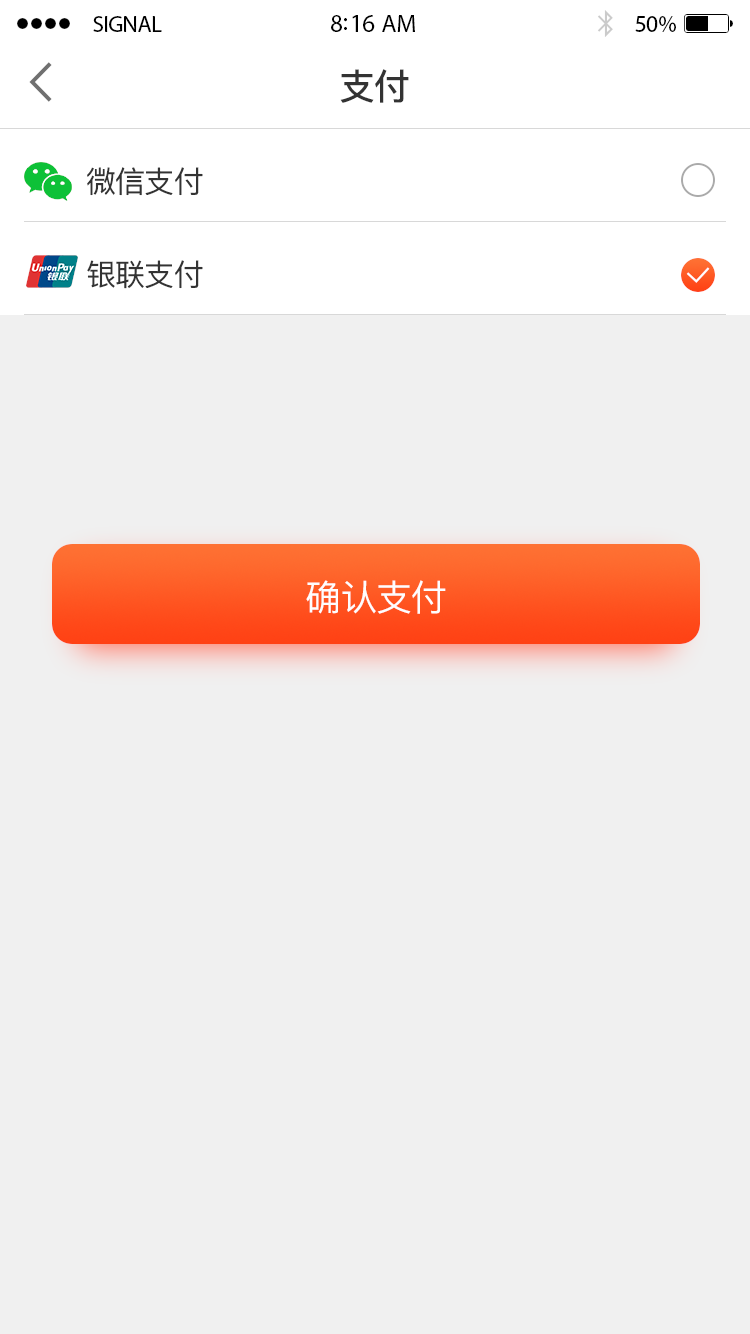
<style>
.page{position:relative;width:750px;height:1334px;background:#f0f0f0}
.page>*{position:absolute;margin:0}
.t1{font:23px "MyriadPro-Regular";letter-spacing:-0.02em;color:#000000}
.t2{font:25px "MyriadPro-Regular";letter-spacing:-0.02em;color:#000000}
.t3{font:24px "MyriadPro-Regular";letter-spacing:-0.02em;color:#000000}
.t4{font:36px "PingFangSC-Medium";letter-spacing:-0.02em;color:#333333}
.t5{font:30px "PingFangSC-Regular";letter-spacing:-0.02em;color:#333333}
.t6{font:36px "PingFangSC-Regular";letter-spacing:-0.02em;color:#fefdfd}
</style>
<div class="page">
<p class="t1" style="left:93px;top:16px;width:69px;height:16px">SIGNAL</p>
<p class="t2" style="left:331px;top:15px;width:84px;height:17px">8:16 AM</p>
<p class="t3" style="left:635px;top:16px;width:41px;height:16px">50%</p>
<p class="t4" style="left:340px;top:69px;width:69px;height:34px">支付</p>
<p class="t5" style="left:87px;top:167px;width:116px;height:29px">微信支付</p>
<p class="t5" style="left:87px;top:260px;width:116px;height:29px">银联支付</p>
<p class="t6" style="left:306px;top:580px;width:140px;height:34px">确认支付</p>
</div>
